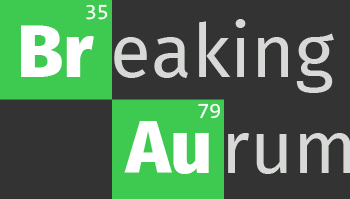
<style>
.page{position:relative;width:350px;height:199px;background:#333333}
.page>*{position:absolute;margin:0}
.t1{font:21.8px "Consolas";color:#ffffff}
.t2{font:74.6px "FiraSans-ExtraBold";color:#ffffff}
.t3{font:74.6px "FiraSans-Regular";color:#d6d9d6}
</style>
<div class="page">
<p class="t1" style="left:86px;top:4px;width:22px;height:16px">35</p>
<p class="t2" style="left:21px;top:25px;width:73px;height:52px">Br</p>
<p class="t3" style="left:114px;top:19px;width:220px;height:74px">eaking</p>
<p class="t1" style="left:198px;top:103px;width:22px;height:16px">79</p>
<p class="t2" style="left:124px;top:121px;width:85px;height:53px">Au</p>
<p class="t3" style="left:228px;top:133px;width:123px;height:41px">rum</p>
</div>
